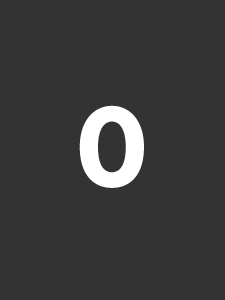
<style>
.page{position:relative;width:225px;height:300px;background:#333333}
.page>*{position:absolute;margin:0}
.t1{font:96px "LeagueSpartan-Bold";letter-spacing:0.04em;color:#ffffff}
</style>
<div class="page">
<p class="t1" style="left:79px;top:105px;width:65px;height:83px">0</p>
</div>
